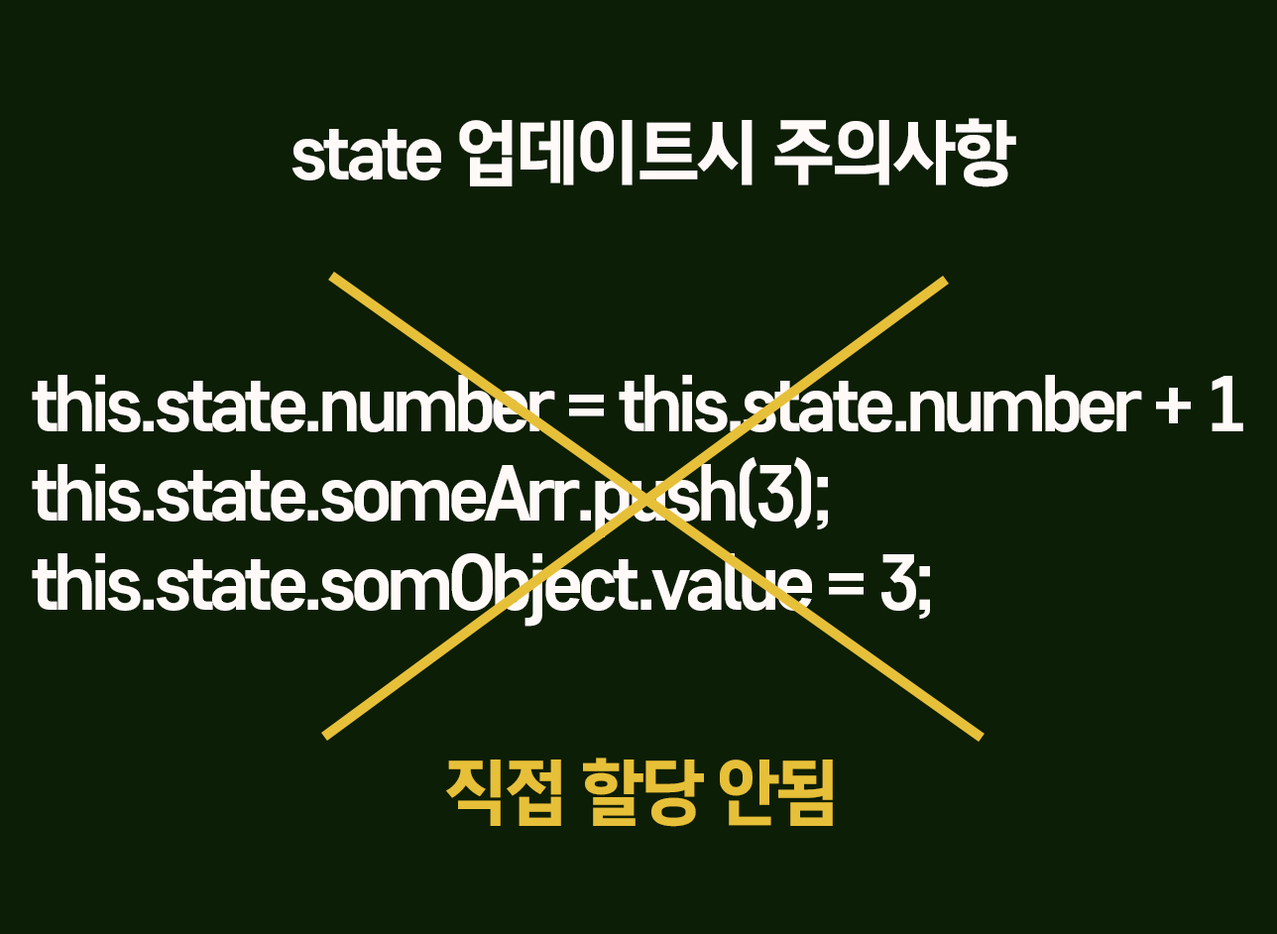
<style>
.page{position:relative;width:1277px;height:934px;background:#0d1e06}
.page>*{position:absolute;margin:0}
.t1{font:71.4px "CoreGothicD-7ExtraBold";letter-spacing:-0.075em;color:#fffaf8}
.t2{font:71.4px/89.2px "CoreGothicD-7ExtraBold";letter-spacing:-0.075em;color:#fffaf8}
.t3{font:71.4px "CoreGothicD-7ExtraBold";letter-spacing:-0.075em;color:#e7c039}
</style>
<div class="page">
<p class="t1" style="left:291px;top:118px;width:725px;height:69px">state 업데이트시 주의사항</p>
<p class="t2" style="left:32px;top:375px;width:1211px;height:252px">this.state.number = this.state.number + 1<br>this.state.someArr.push(3);<br>this.state.somObject.value = 3;</p>
<p class="t3" style="left:446px;top:757px;width:387px;height:70px">직접 할당 안됨</p>
</div>
